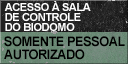
<style>
.page{position:relative;width:128px;height:64px}
.page>*{position:absolute;margin:0}
.t1{font:10.9px/9.9px "Arial-BoldMT";letter-spacing:-0.03em;color:#ffffff;text-transform:uppercase}
.t2{font:13.3px/13.3px "Arial-BoldMT";letter-spacing:-0.03em;color:#000000;text-transform:uppercase;scale:0.95 1}
</style>
<div class="page">
<p class="t1" style="left:4px;top:1px;width:87px;height:30px">Acesso à sala<br>de controle<br>do Biodomo</p>
<p class="t2" style="left:4px;top:36px;width:121px;height:24px">Somente pessoal<br>autorizado</p>
</div>
